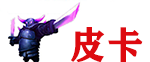
<style>
.page{position:relative;width:150px;height:62px;background:#ffffff}
.page>*{position:absolute;margin:0}
.t1{font:37.3px "FZCHSJW--GB1-0";color:#dd0a0f}
</style>
<div class="page">
<p class="t1" style="left:71px;top:27px;width:72px;height:36px">皮卡</p>
</div>
